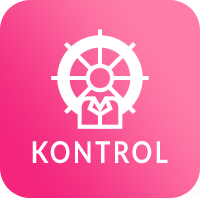
<style>
.page{position:relative;width:200px;height:198px}
.page>*{position:absolute;margin:0}
.t1{font:30.2px "Lato-Bold";letter-spacing:0.092em;color:#ffffff;scale:0.85 1}
</style>
<div class="page">
<p class="t1" style="left:32px;top:140px;width:136px;height:24px">KONTROL</p>
</div>
